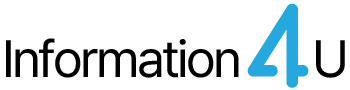
<style>
.page{position:relative;width:350px;height:90px;background:#ffffff}
.page>*{position:absolute;margin:0}
.t1{font:52.1px "Pretendard-Regular";letter-spacing:-0.05em;color:#000000}
</style>
<div class="page">
<p class="t1" style="left:6px;top:38px;width:339px;height:40px">Information       U</p>
</div>
